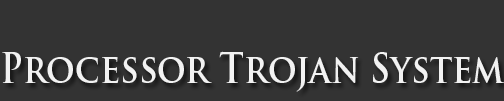
<style>
.page{position:relative;width:504px;height:101px;background:#333333}
.page>*{position:absolute;margin:0}
.t1{font:40.1px "TrajanPro-Bold";color:#f2f2f2;scale:0.87 1}
</style>
<div class="page">
<p class="t1" style="left:2px;top:51px;width:502px;height:41px">Processor Trojan System</p>
</div>
